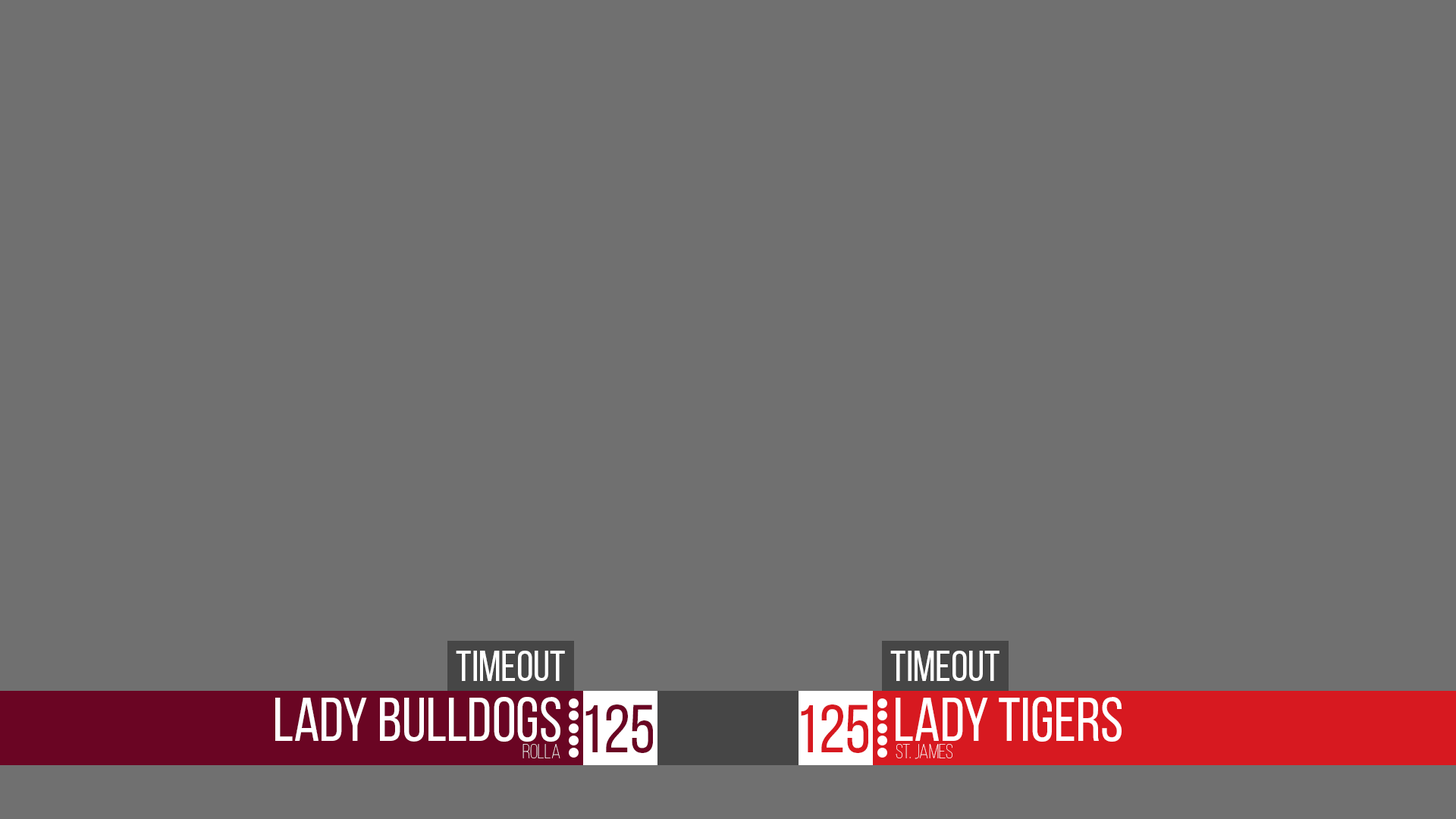
<style>
.page{position:relative;width:1456px;height:819px;background:#707070}
.page>*{position:absolute;margin:0}
.t1{font:43.2px "BebasNeueRegular";color:#ffffff}
.t2{font:61.7px "BebasNeueRegular";color:#ffffff}
.t3{font:67.6px "BebasNeueRegular";color:#6a0523}
.t4{font:67.6px "BebasNeueRegular";color:#d71920}
.t5{font:20.4px "BebasNeue-Thin"}
.t6{font:20.4px "BebasNeue-Thin";color:#ffffff}
</style>
<div class="page">
<p class="t1" style="left:456px;top:651px;width:109px;height:30px">TIMEOUT</p>
<p class="t1" style="left:890px;top:651px;width:109px;height:30px">TIMEOUT</p>
<p class="t2" style="left:275px;top:697px;width:285px;height:45px">Lady Bulldogs</p>
<p class="t2" style="left:896px;top:697px;width:226px;height:45px">LADY TIGERS</p>
<p class="t3" style="left:585px;top:704px;width:68px;height:49px">125</p>
<p class="t4" style="left:801px;top:704px;width:67px;height:49px">125</p>
<p class="t5" style="left:522px;top:744px;width:38px;height:14px">Rolla</p>
<p class="t6" style="left:896px;top:744px;width:56px;height:15px">ST. JAMES</p>
</div>
